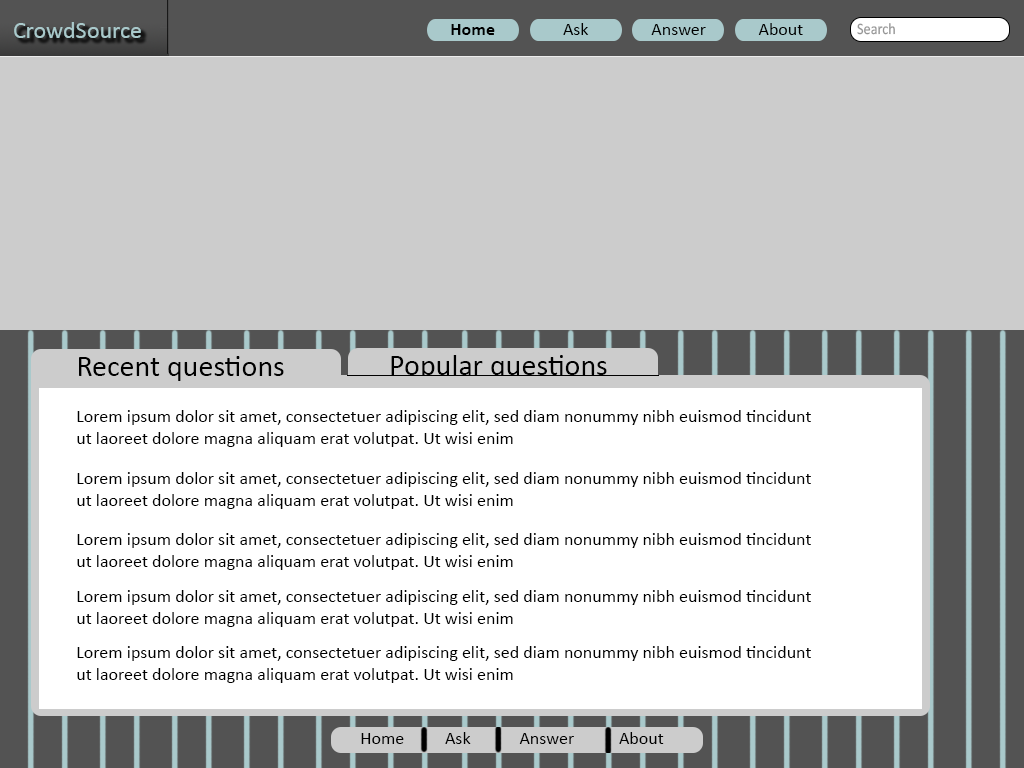
<style>
.page{position:relative;width:1024px;height:768px;background:#cccccc}
.page>*{position:absolute;margin:0}
.t1{font:24px "Calibri";color:#a9c9cb}
.t2{font:18px "Calibri-Bold";color:#000000}
.t3{font:18px "Calibri";color:#000000}
.t4{font:16px "Calibri";color:#959595;scale:0.89 1}
.t5{font:30px "Calibri";color:#000000}
</style>
<div class="page">
<p class="t1" style="left:14px;top:22px;width:127px;height:16px">CrowdSource</p>
<p class="t2" style="left:451px;top:24px;width:44px;height:11px">Home</p>
<p class="t3" style="left:563px;top:23px;width:26px;height:12px">Ask</p>
<p class="t3" style="left:651px;top:24px;width:55px;height:11px">Answer</p>
<p class="t3" style="left:758px;top:23px;width:45px;height:12px">About</p>
<p class="t4" style="left:857px;top:23px;width:38px;height:12px">Search</p>
<p class="t5" style="left:79px;top:356px;width:205px;height:25px">Recent questions</p>
<p class="t5" style="left:391px;top:355px;width:216px;height:25px">Popular questions</p>
<p class="t3" style="left:77px;top:410px;width:734px;height:37px">Lorem ipsum dolor sit amet, consectetuer adipiscing elit, sed diam nonummy nibh euismod tincidunt ut laoreet dolore magna aliquam erat volutpat. Ut wisi enim</p>
<p class="t3" style="left:77px;top:472px;width:734px;height:37px">Lorem ipsum dolor sit amet, consectetuer adipiscing elit, sed diam nonummy nibh euismod tincidunt ut laoreet dolore magna aliquam erat volutpat. Ut wisi enim</p>
<p class="t3" style="left:77px;top:533px;width:734px;height:37px">Lorem ipsum dolor sit amet, consectetuer adipiscing elit, sed diam nonummy nibh euismod tincidunt ut laoreet dolore magna aliquam erat volutpat. Ut wisi enim</p>
<p class="t3" style="left:77px;top:590px;width:734px;height:37px">Lorem ipsum dolor sit amet, consectetuer adipiscing elit, sed diam nonummy nibh euismod tincidunt ut laoreet dolore magna aliquam erat volutpat. Ut wisi enim</p>
<p class="t3" style="left:77px;top:646px;width:734px;height:37px">Lorem ipsum dolor sit amet, consectetuer adipiscing elit, sed diam nonummy nibh euismod tincidunt ut laoreet dolore magna aliquam erat volutpat. Ut wisi enim</p>
<p class="t3" style="left:361px;top:732px;width:303px;height:12px">Home          Ask            Answer           About</p>
</div>
